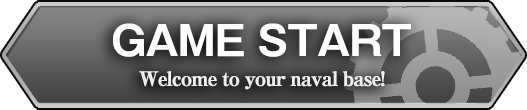
<style>
.page{position:relative;width:527px;height:110px}
.page>*{position:absolute;margin:0}
.t1{font:20px/30px "RyuminPro-ExBold";letter-spacing:-0.08em;color:#efefef;font-weight:bold}
.t2{font:40px/30px "GothicMB101Pro-DeBold";letter-spacing:-0.04em;color:#ffffff;font-weight:bold}
</style>
<div class="page">
<p class="t1" style="left:113px;top:23px;width:298px;height:67px;text-align:center"><span class="t2">GAME START<br></span>Welcome to your naval base!</p>
</div>
